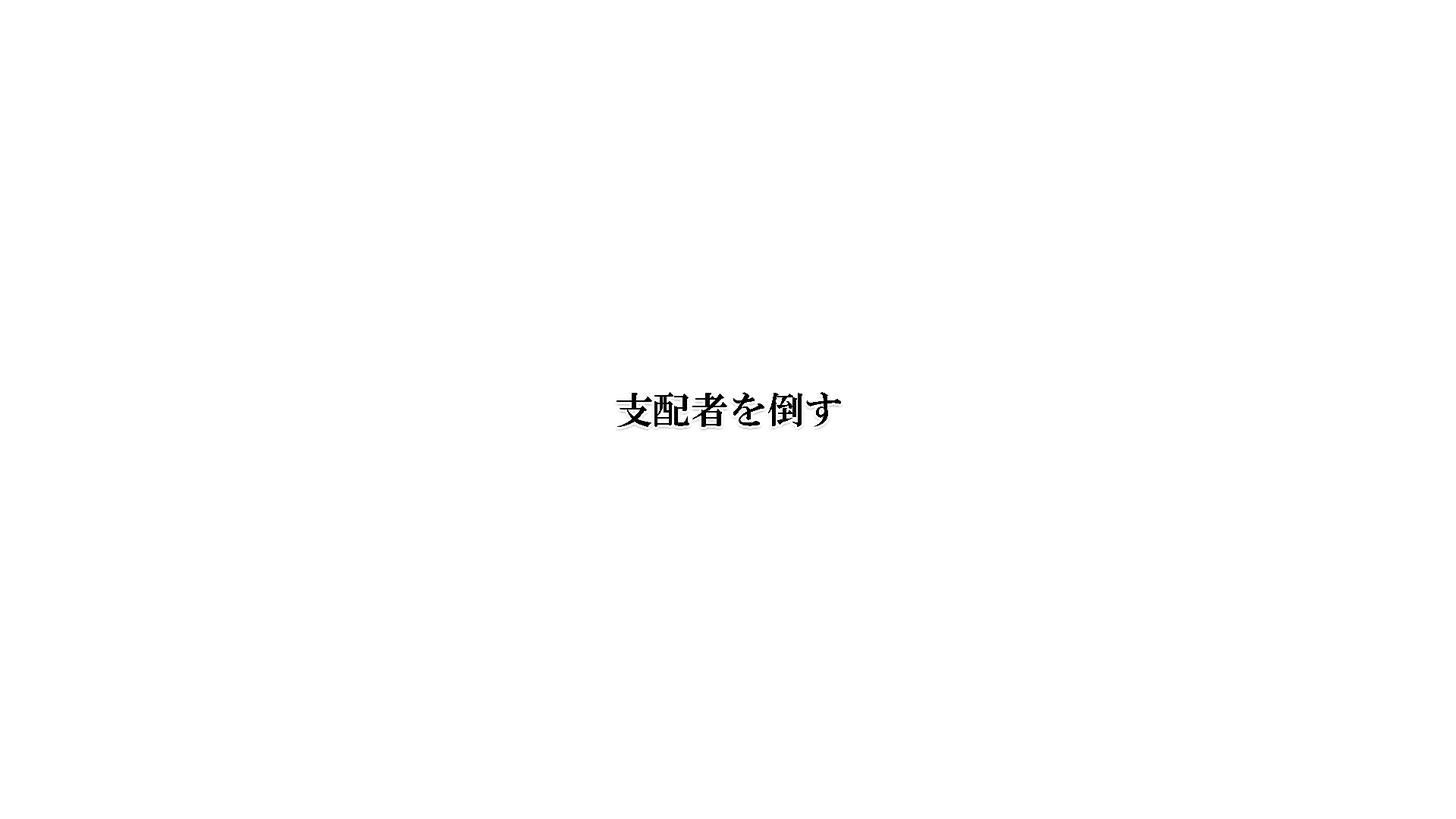
<style>
.page{position:relative;width:1456px;height:819px;background:#ffffff}
.page>*{position:absolute;margin:0}
.t1{font:37.9px "HGMinchoE";color:#000000}
</style>
<div class="page">
<p class="t1" style="left:617px;top:392px;width:224px;height:35px">支配者を倒す</p>
</div>
